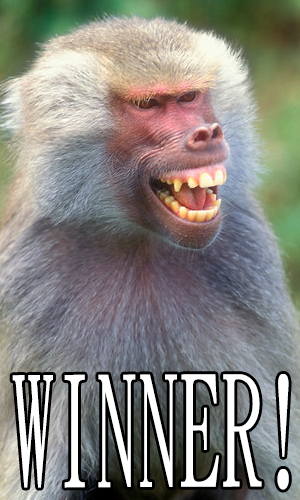
<style>
.page{position:relative;width:300px;height:500px}
.page>*{position:absolute;margin:0}
.t1{font:152px "DFKaiShu-SB-Estd-BF";color:#ffffff;scale:0.55 1}
</style>
<div class="page">
<p class="t1" style="left:12px;top:374px;width:277px;height:116px">WINNER!</p>
</div>
